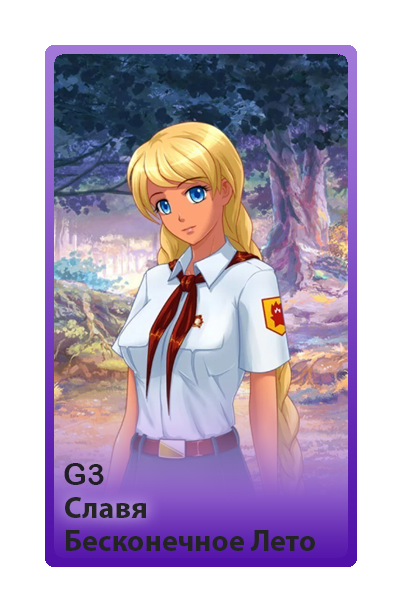
<style>
.page{position:relative;width:402px;height:603px;background:#ffffff}
.page>*{position:absolute;margin:0}
.t1{font:30px "ArialRoundedMTBold";color:#211f25}
.t2{font:30px "MyriadPro-Bold";color:#242424}
</style>
<div class="page">
<p class="t1" style="left:64px;top:463px;width:40px;height:22px">G3</p>
<p class="t2" style="left:65px;top:497px;width:81px;height:21px">Славя</p>
<p class="t2" style="left:66px;top:530px;width:249px;height:21px">Бесконечное Лето</p>
</div>
